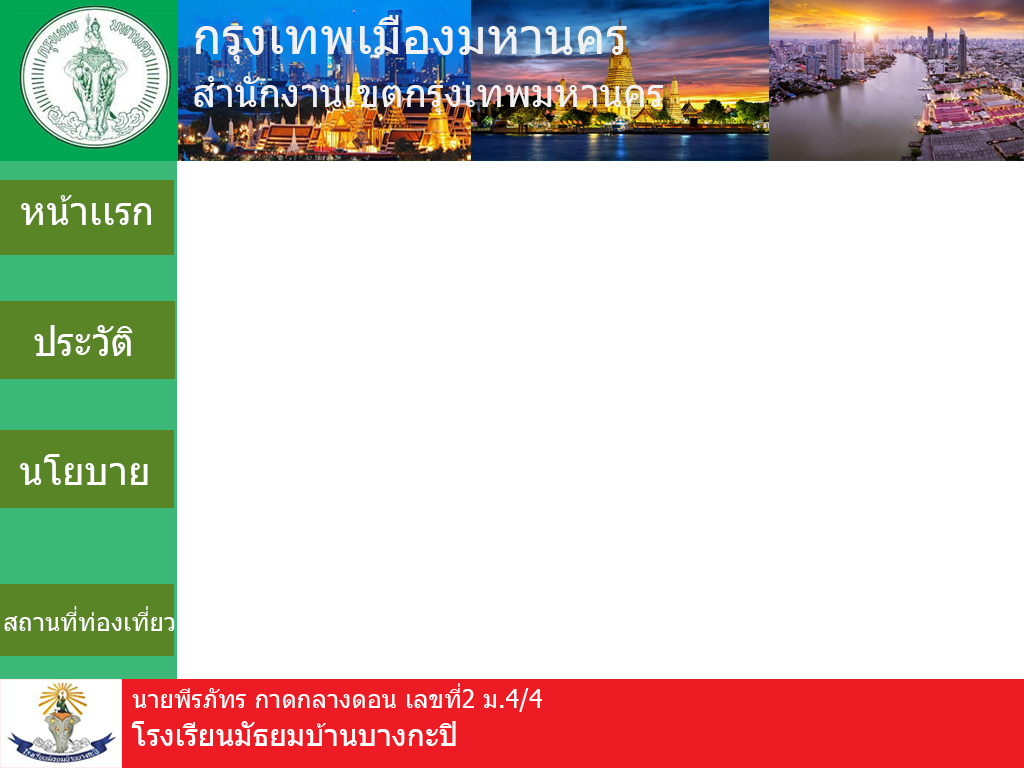
<style>
.page{position:relative;width:1024px;height:768px;background:#ffffff}
.page>*{position:absolute;margin:0}
.t1{font:50px "Tahoma";color:#f1f1f1}
.t2{font:38.9px "Tahoma";color:#f1f1f1}
.t3{font:38.9px "Tahoma";color:#ffffff}
.t4{font:25px "Tahoma";color:#ffffff}
.t5{font:30.6px "Tahoma";color:#ffffff}
</style>
<div class="page">
<p class="t1" style="left:195px;top:15px;width:432px;height:49px">กรุงเทพเมืองมหานคร</p>
<p class="t2" style="left:194px;top:76px;width:469px;height:39px">สำนักงานเขตกรุงเทพมหานคร</p>
<p class="t3" style="left:21px;top:195px;width:130px;height:30px">หน้าเเรก</p>
<p class="t3" style="left:34px;top:325px;width:99px;height:31px">ประวัติ</p>
<p class="t3" style="left:20px;top:454px;width:128px;height:31px">นโยบาย</p>
<p class="t4" style="left:4px;top:606px;width:171px;height:25px">สถานที่ท่องเที่ยว</p>
<p class="t4" style="left:132px;top:683px;width:410px;height:29px">นายพีรภัทร กาดกลางดอน เลขที่2 ม.4/4</p>
<p class="t5" style="left:131px;top:721px;width:325px;height:25px">โรงเรียนมัธยมบ้านบางกะปิ</p>
</div>
